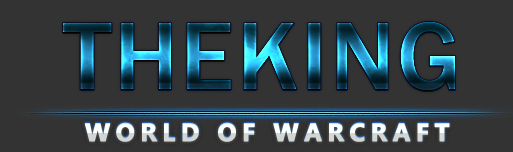
<style>
.page{position:relative;width:513px;height:152px;background:#333333}
.page>*{position:absolute;margin:0}
.t1{font:100px "FranklinGothic-Medium";letter-spacing:0.025em;text-transform:uppercase}
.t2{font:25px "KhmerUI-Bold";letter-spacing:0.2em;text-transform:uppercase;font-weight:bold}
</style>
<div class="page">
<p class="t1" style="left:63px;top:22px;width:392px;height:69px">theking</p>
<p class="t1" style="left:63px;top:22px;width:392px;height:69px">theking</p>
<p class="t1" style="left:63px;top:22px;width:392px;height:69px">theking</p>
<p class="t2" style="left:84px;top:122px;width:366px;height:20px">world of warcraft</p>
<p class="t2" style="left:84px;top:122px;width:366px;height:20px">world of warcraft</p>
</div>
